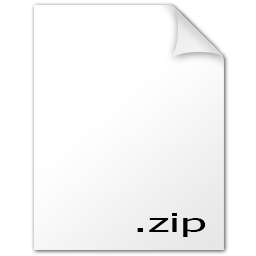
<style>
.page{position:relative;width:256px;height:256px;background:#ffffff}
.page>*{position:absolute;margin:0}
.t1{font:25.9px "Tahoma";color:#000000;scale:1.87 1}
</style>
<div class="page">
<p class="t1" style="left:137px;top:213px;width:69px;height:24px">.zip</p>
</div>
